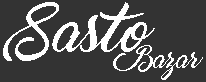
<style>
.page{position:relative;width:206px;height:82px;background:#333333}
.page>*{position:absolute;margin:0}
.t1{font:50.2px "Marguerite";color:#ffffff}
.t2{font:22.2px "Marguerite";color:#ffffff}
</style>
<div class="page">
<p class="t1" style="left:3px;top:2px;width:152px;height:59px">Sasto</p>
<p class="t2" style="left:113px;top:45px;width:90px;height:35px">Bazar</p>
</div>
